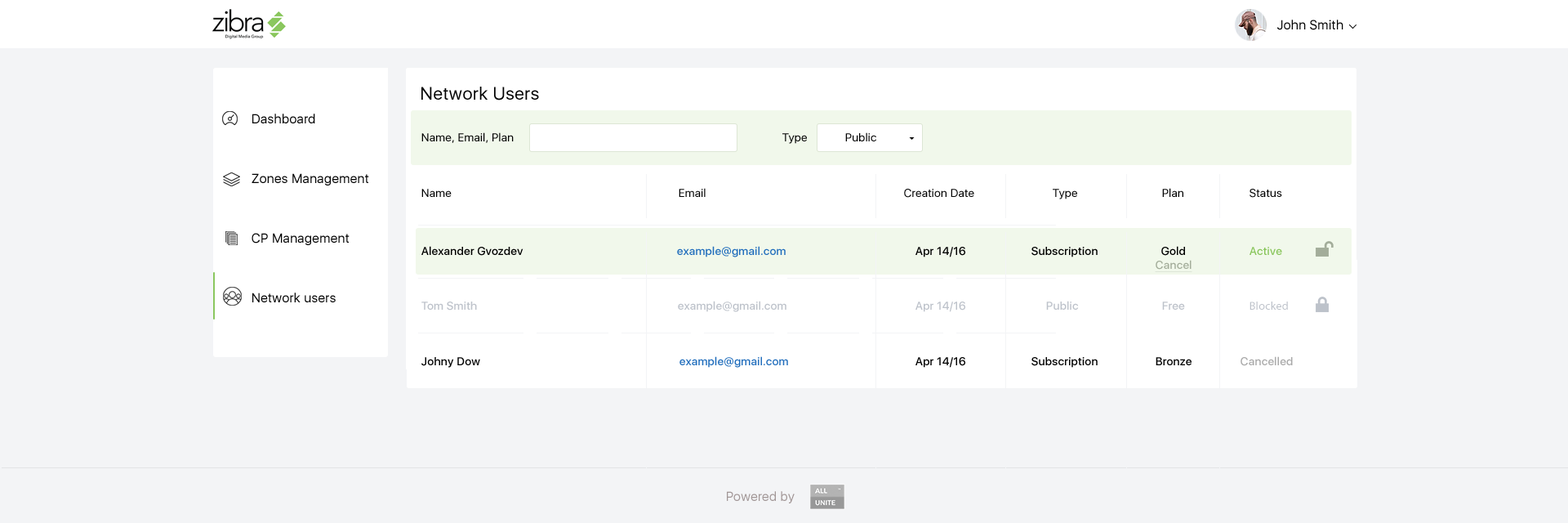
<style>
.page{position:relative;width:1568px;height:523px;background:#f3f4f6}
.page>*{position:absolute;margin:0}
.t1{font:13.1px "SFUIDisplay-Regular";letter-spacing:0.02em;color:#000000}
.t2{font:18px "SFUIDisplay-Regular";letter-spacing:0.02em;color:#000000}
.t3{font:13.1px/59.6px "SFUIDisplay-Regular";letter-spacing:0.02em;color:#000000}
.t4{font:11.4px "SFUIDisplay-Regular";letter-spacing:0.02em;color:#000000}
.t5{font:11.4px "SFUIDisplay-Medium";letter-spacing:0.02em;color:#000000}
.t6{font:11.4px "SFUIDisplay-Medium";letter-spacing:0.02em;color:#206dbc}
.t7{font:11.4px "SFUIDisplay-Medium";letter-spacing:0.02em;color:#8ac65d}
.t8{font:11.4px "SFUIDisplay-Medium";letter-spacing:0.02em;color:#a3ad9a;text-decoration:underline}
.t9{font:11.4px "SFUIDisplay-Medium";letter-spacing:0.02em;color:#bdc2ca}
.t10{font:11.4px "MyriadPro-Regular";letter-spacing:0.02em;color:#bdc2ca}
.t11{font:11.4px "SFUIDisplay-Medium";letter-spacing:0.02em;color:#a9a9a9}
.t12{font:13.1px "SFUIDisplay-Regular";letter-spacing:0.02em;color:#a19696}
</style>
<div class="page">
<p class="t1" style="left:1277px;top:20px;width:66px;height:10px">John Smith</p>
<p class="t2" style="left:421px;top:87px;width:118px;height:13px">Network Users</p>
<p class="t3" style="left:252px;top:114px;width:117px;height:188px;text-align:right">Dashboard<br>Zones Management<br>CP Management<br>Network users</p>
<p class="t4" style="left:421px;top:132px;width:93px;height:11px">Name, Email, Plan</p>
<p class="t4" style="left:782px;top:133px;width:25px;height:11px">Type</p>
<p class="t4" style="left:845px;top:132px;width:31px;height:9px">Public</p>
<p class="t4" style="left:421px;top:189px;width:31px;height:8px">Name</p>
<p class="t4" style="left:679px;top:188px;width:27px;height:9px">Email</p>
<p class="t4" style="left:904px;top:189px;width:70px;height:9px">Creation Date</p>
<p class="t4" style="left:1053px;top:189px;width:24px;height:10px">Type</p>
<p class="t4" style="left:1162px;top:188px;width:21px;height:9px">Plan</p>
<p class="t4" style="left:1250px;top:189px;width:32px;height:9px">Status</p>
<p class="t5" style="left:421px;top:246px;width:102px;height:10px">Alexander Gvozdev</p>
<p class="t6" style="left:677px;top:246px;width:109px;height:11px">example@gmail.com</p>
<p class="t5" style="left:1161px;top:246px;width:24px;height:10px">Gold</p>
<p class="t5" style="left:915px;top:247px;width:50px;height:10px">Apr 14/16</p>
<p class="t5" style="left:1031px;top:247px;width:67px;height:10px">Subscription</p>
<p class="t7" style="left:1250px;top:247px;width:32px;height:8px">Active</p>
<p class="t8" style="left:1155px;top:260px;width:37px;height:12px">Cancel</p>
<p class="t9" style="left:421px;top:301px;width:56px;height:9px">Tom Smith</p>
<p class="t9" style="left:678px;top:301px;width:108px;height:11px">example@gmail.com</p>
<p class="t9" style="left:915px;top:301px;width:50px;height:11px">Apr 14/16</p>
<p class="t9" style="left:1046px;top:301px;width:33px;height:9px">Public</p>
<p class="t9" style="left:1162px;top:301px;width:23px;height:9px">Free</p>
<p class="t10" style="left:1250px;top:301px;width:38px;height:9px">Blocked</p>
<p class="t5" style="left:421px;top:357px;width:59px;height:11px">Johny Dow</p>
<p class="t6" style="left:679px;top:356px;width:109px;height:12px">example@gmail.com</p>
<p class="t5" style="left:915px;top:357px;width:50px;height:11px">Apr 14/16</p>
<p class="t5" style="left:1031px;top:357px;width:67px;height:11px">Subscription</p>
<p class="t5" style="left:1156px;top:357px;width:36px;height:8px">Bronze</p>
<p class="t11" style="left:1241px;top:356px;width:52px;height:10px">Cancelled</p>
<p class="t12" style="left:727px;top:491px;width:68px;height:12px">Powered by</p>
</div>
